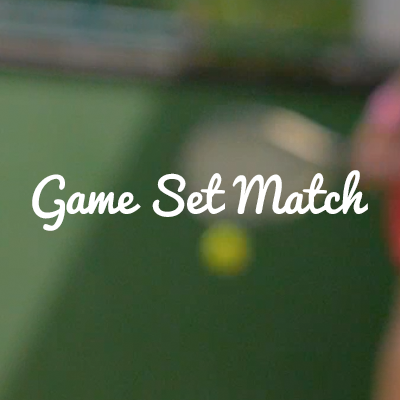
<style>
.page{position:relative;width:400px;height:400px}
.page>*{position:absolute;margin:0}
.t1{font:46.7px "Pacifico-Regular";color:#ffffff}
</style>
<div class="page">
<p class="t1" style="left:32px;top:170px;width:336px;height:61px">Game Set Match</p>
</div>
